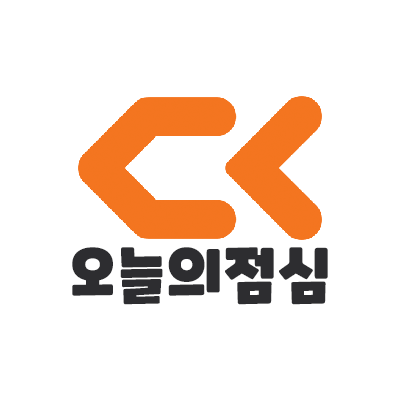
<style>
.page{position:relative;width:400px;height:400px;background:#ffffff}
.page>*{position:absolute;margin:0}
.t1{font:60px "CookieRunOTF-Black";color:#2d2d30}
</style>
<div class="page">
<p class="t1" style="left:72px;top:247px;width:256px;height:58px">오늘의점심</p>
</div>
